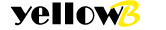
<style>
.page{position:relative;width:166px;height:30px;background:#ffffff}
.page>*{position:absolute;margin:0}
.t1{font:32px "Broadway";letter-spacing:0.005em;color:#010101;font-weight:bold}
.t2{font:38px "ARBERKLEY";letter-spacing:0.005em;color:#ffeb0a;font-weight:bold}
</style>
<div class="page">
<p class="t1" style="left:10px;top:2px;width:114px;height:24px">yellow</p>
<p class="t2" style="left:110px;top:0px;width:30px;height:27px;rotate:-1deg">B</p>
</div>
